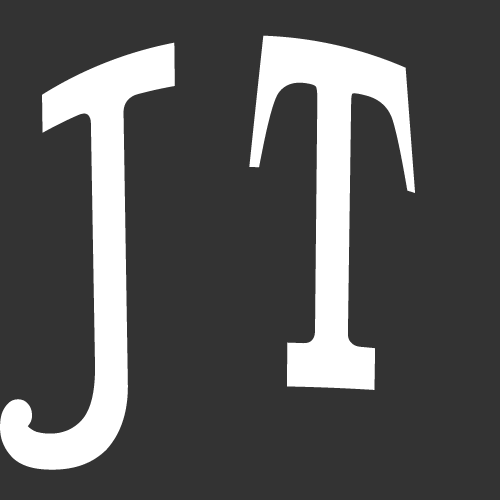
<style>
.page{position:relative;width:500px;height:500px;background:#333333}
.page>*{position:absolute;margin:0}
.t1{font:411.1px "NSimSun";letter-spacing:0.15em;color:#ffffff;scale:0.93 1}
</style>
<div class="page">
<p class="t1" style="left:0px;top:35px;width:415px;height:435px">JT</p>
</div>
